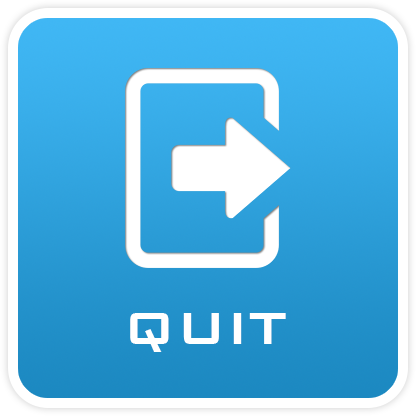
<style>
.page{position:relative;width:416px;height:416px;background:#ffffff}
.page>*{position:absolute;margin:0}
.t1{font:60px "BankGothicBT-Medium";color:#ffffff}
</style>
<div class="page">
<p class="t1" style="left:130px;top:313px;width:156px;height:39px">QUIT</p>
</div>
